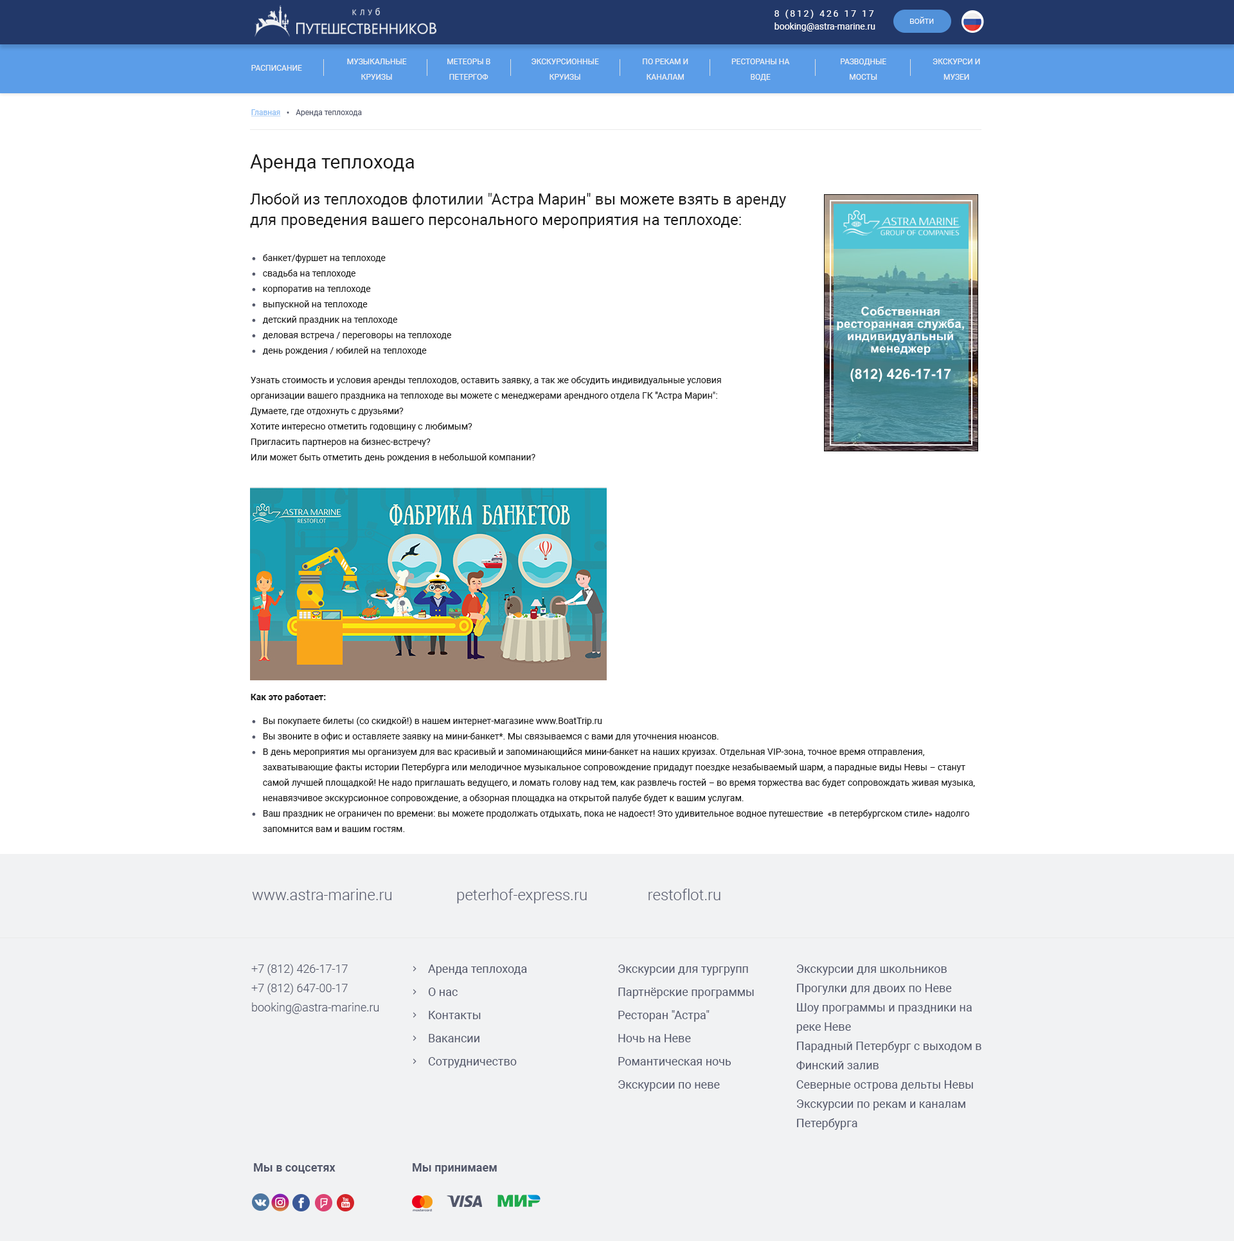
<style>
.page{position:relative;width:1234px;height:1241px;background:#ffffff}
.page>*{position:absolute;margin:0}
.t1{font:9px "Roboto-Regular";letter-spacing:0.2em;color:#ffffff}
.t2{font:9px "Roboto-Light";color:#ffffff}
.t3{font:9px "Roboto-Regular";color:#ffffff}
.t4{font:7.7px "Roboto-Regular";color:#f1f2f3;text-transform:uppercase}
.t5{font:7.7px/15.4px "Roboto-Regular";color:#f1f2f3;text-transform:uppercase}
.t6{font:7.7px "Roboto-Regular";color:#52576a}
.t7{font:7.7px "Roboto-Regular";color:#85b9f3;text-decoration:underline}
.t8{font:19.3px "Roboto-Regular";color:#191919}
.t9{font:15.4px/20.8px "Roboto-Regular";color:#191919}
.t10{font:9px/15.4px "Roboto-Regular";color:#191919}
.t11{font:9px "Roboto-Bold";color:#191919}
.t12{font:15.4px "Roboto-Light";color:#515669}
.t13{font:11.6px/19.3px "Roboto-Light";color:#515669}
.t14{font:11.6px/23.1px "Roboto-Regular";color:#515669}
.t15{font:11.6px/19.3px "Roboto-Regular";color:#515669}
.t16{font:11.6px "Roboto-Bold";color:#515669}
</style>
<div class="page">
<p class="t1" style="left:775px;top:10px;width:99px;height:9px">8 (812) 426 17 17</p>
<p class="t2" style="left:910px;top:17px;width:24px;height:7px">войти</p>
<p class="t3" style="left:775px;top:23px;width:101px;height:9px">booking@astra-marine.ru</p>
<p class="t4" style="left:251px;top:65px;width:51px;height:6px">Расписание</p>
<p class="t5" style="left:347px;top:59px;width:60px;height:21px;text-align:center">музыкальные<br>круизы</p>
<p class="t5" style="left:447px;top:59px;width:44px;height:21px;text-align:center">метеоры в петергоф</p>
<p class="t5" style="left:532px;top:59px;width:67px;height:21px;text-align:center">экскурсионные круизы</p>
<p class="t5" style="left:643px;top:59px;width:46px;height:21px;text-align:center">по рекам и каналам</p>
<p class="t5" style="left:732px;top:59px;width:58px;height:22px;text-align:center">рестораны на воде</p>
<p class="t5" style="left:841px;top:59px;width:46px;height:21px;text-align:center">разводные мосты</p>
<p class="t5" style="left:933px;top:59px;width:47px;height:21px;text-align:center">экскурси и музеи</p>
<p class="t6" style="left:251px;top:109px;width:111px;height:8px"><span class="t7">Главная      </span>  Аренда теплохода</p>
<p class="t8" style="left:250px;top:154px;width:165px;height:18px">Аренда теплохода</p>
<p class="t9" style="left:250px;top:193px;width:537px;height:35px">Любой из теплоходов флотилии "Астра Марин" вы можете взять в аренду для проведения вашего персонального мероприятия на теплоходе:</p>
<p class="t10" style="left:262px;top:254px;width:189px;height:102px">банкет/фуршет на теплоходе<br>свадьба на теплоходе<br>корпоратив на теплоходе<br>выпускной на теплоходе<br>детский праздник на теплоходе<br>деловая встреча / переговоры на теплоходе<br>день рождения / юбилей на теплоходе</p>
<p class="t10" style="left:251px;top:376px;width:470px;height:86px">Узнать стоимость и условия аренды теплоходов, оставить заявку, а так же обсудить индивидуальные условия<br>организации вашего праздника на теплоходе вы можете с менеджерами арендного отдела ГК "Астра Марин":<br>Думаете, где отдохнуть с друзьями?<br>Хотите интересно отметить годовщину с любимым?<br>Пригласить партнеров на бизнес-встречу?<br>Или может быть отметить день рождения в небольшой компании?</p>
<p class="t11" style="left:251px;top:693px;width:75px;height:9px">Как это работает:</p>
<p class="t10" style="left:263px;top:717px;width:712px;height:115px">Вы покупаете билеты (со скидкой!) в нашем интернет-магазине www.BoatTrip.ru<br>Вы звоните в офис и оставляете заявку на мини-банкет*. Мы связываемся с вами для уточнения нюансов.<br>В день мероприятия мы организуем для вас красивый и запоминающийся мини-банкет на наших круизах. Отдельная VIP-зона, точное время отправления, захватывающие факты истории Петербурга или мелодичное музыкальное сопровождение придадут поездке незабываемый шарм, а парадные виды Невы – станут самой лучшей площадкой! Не надо приглашать ведущего, и ломать голову над тем, как развлечь гостей – во время торжества вас будет сопровождать живая музыка, ненавязчивое экскурсионное сопровождение, а обзорная площадка на открытой палубе будет к вашим услугам.<br>Ваш праздник не ограничен по времени: вы можете продолжать отдыхать, пока не надоест! Это удивительное водное путешествие  «в петербургском стиле» надолго запомнится вам и вашим гостям.</p>
<p class="t12" style="left:252px;top:888px;width:469px;height:15px">www.astra-marine.ru                 peterhof-express.ru                restoflot.ru</p>
<p class="t13" style="left:251px;top:964px;width:128px;height:50px">+7 (812) 426-17-17<br>+7 (812) 647-00-17<br>booking@astra-marine.ru</p>
<p class="t14" style="left:428px;top:964px;width:99px;height:104px">Аренда теплохода<br>О нас<br>Контакты<br>Вакансии<br>Сотрудничество</p>
<p class="t14" style="left:618px;top:964px;width:136px;height:127px">Экскурсии для тургрупп<br>Партнёрские программы<br>Ресторан "Астра"<br>Ночь на Неве<br>Романтическая ночь<br>Экскурсии по неве</p>
<p class="t15" style="left:797px;top:964px;width:185px;height:166px">Экскурсии для школьников<br>Прогулки для двоих по Неве<br>Шоу программы и праздники на реке Неве<br>Парадный Петербург с выходом в Финский залив<br>Северные острова дельты Невы<br>Экскурсии по рекам и каналам Петербурга</p>
<p class="t16" style="left:254px;top:1163px;width:82px;height:10px">Мы в соцсетях</p>
<p class="t16" style="left:413px;top:1163px;width:84px;height:11px">Мы принимаем</p>
</div>
